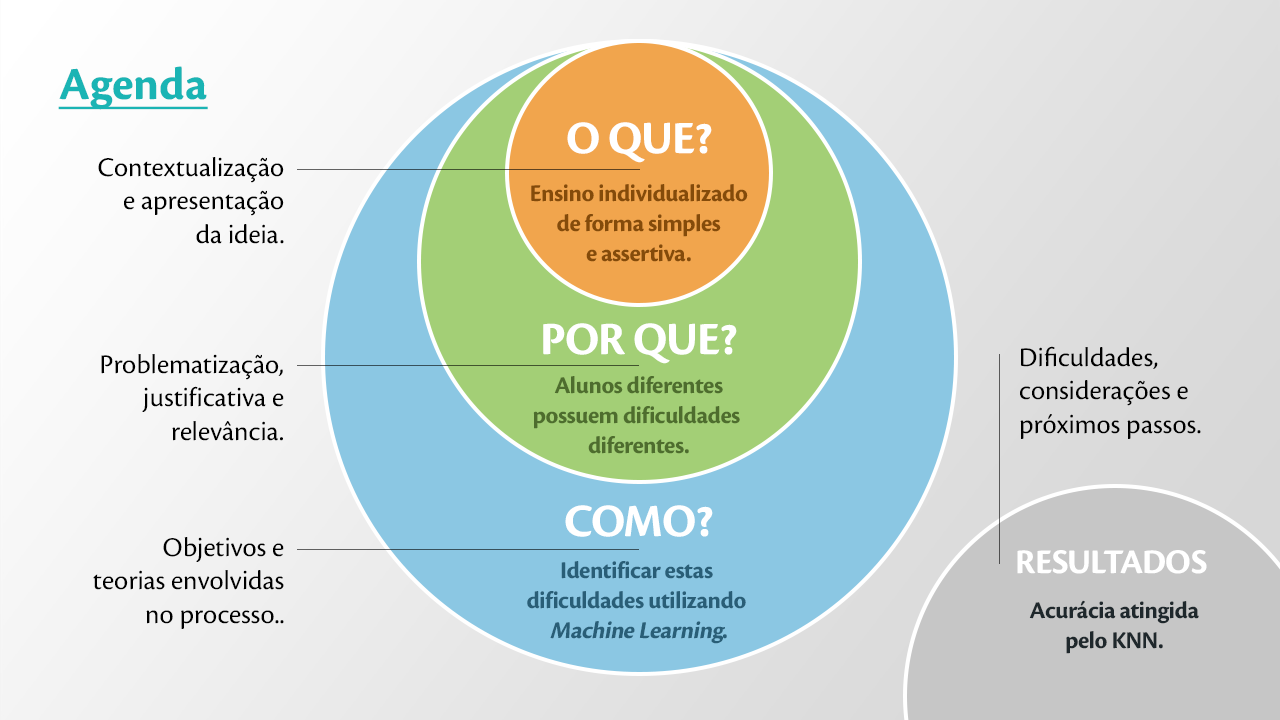
<style>
.page{position:relative;width:1280px;height:720px}
.page>*{position:absolute;margin:0}
.t1{font:48px "CronosPro-Bold";color:#1ab4b4;text-decoration:underline}
.t2{font:48px "CronosPro-Bold";letter-spacing:-0.025em;color:#ffffff}
.t3{font:28px "CronosPro-Regular";color:#000000}
.t4{font:25px "CronosPro-Bold";letter-spacing:-0.025em;color:#844b0a}
.t5{font:25px "CronosPro-Bold";letter-spacing:-0.025em;color:#4e6d2e}
.t6{font:35.9px "CronosPro-Bold";letter-spacing:-0.025em;color:#ffffff}
.t7{font:25px "CronosPro-Bold";letter-spacing:-0.025em;color:#295e77}
.t8{font:25px "CronosPro-Bold";letter-spacing:-0.025em;color:#295e77;font-style:italic}
.t9{font:24.9px "CronosPro-Bold";letter-spacing:-0.025em;color:#1f282c}
</style>
<div class="page">
<p class="t1" style="left:58px;top:66px;width:150px;height:44px">Agenda</p>
<p class="t2" style="left:567px;top:122px;width:145px;height:41px">O QUE?</p>
<p class="t3" style="left:98px;top:157px;width:186px;height:87px;text-align:right">Contextualização <br>e apresentação <br>da ideia.</p>
<p class="t4" style="left:531px;top:184px;width:217px;height:78px;text-align:center">Ensino individualizado<br>de forma simples<br>e assertiva.</p>
<p class="t2" style="left:543px;top:323px;width:194px;height:41px">POR QUE?</p>
<p class="t3" style="left:1020px;top:346px;width:181px;height:93px">Dificuldades,<br>considerações e<br>próximos passos.</p>
<p class="t3" style="left:101px;top:354px;width:183px;height:87px;text-align:right">Problematização, <br>justificativa e <br>relevância.</p>
<p class="t5" style="left:533px;top:376px;width:207px;height:78px;text-align:center">Alunos diferentes<br>possuem dificuldades <br>diferentes.</p>
<p class="t2" style="left:565px;top:505px;width:148px;height:32px">COMO?</p>
<p class="t3" style="left:93px;top:537px;width:191px;height:92px;text-align:right">Objetivos e <br>teorias envolvidas <br>no processo..</p>
<p class="t6" style="left:1017px;top:550px;width:190px;height:24px">RESULTADOS</p>
<p class="t7" style="left:527px;top:561px;width:219px;height:83px;text-align:center">Identificar estas <br>dificuldades utilizando <br><span class="t8">Machine Learning</span>.</p>
<p class="t9" style="left:1029px;top:600px;width:170px;height:54px;text-align:center">Acurácia atingida<br>pelo KNN.</p>
</div>
